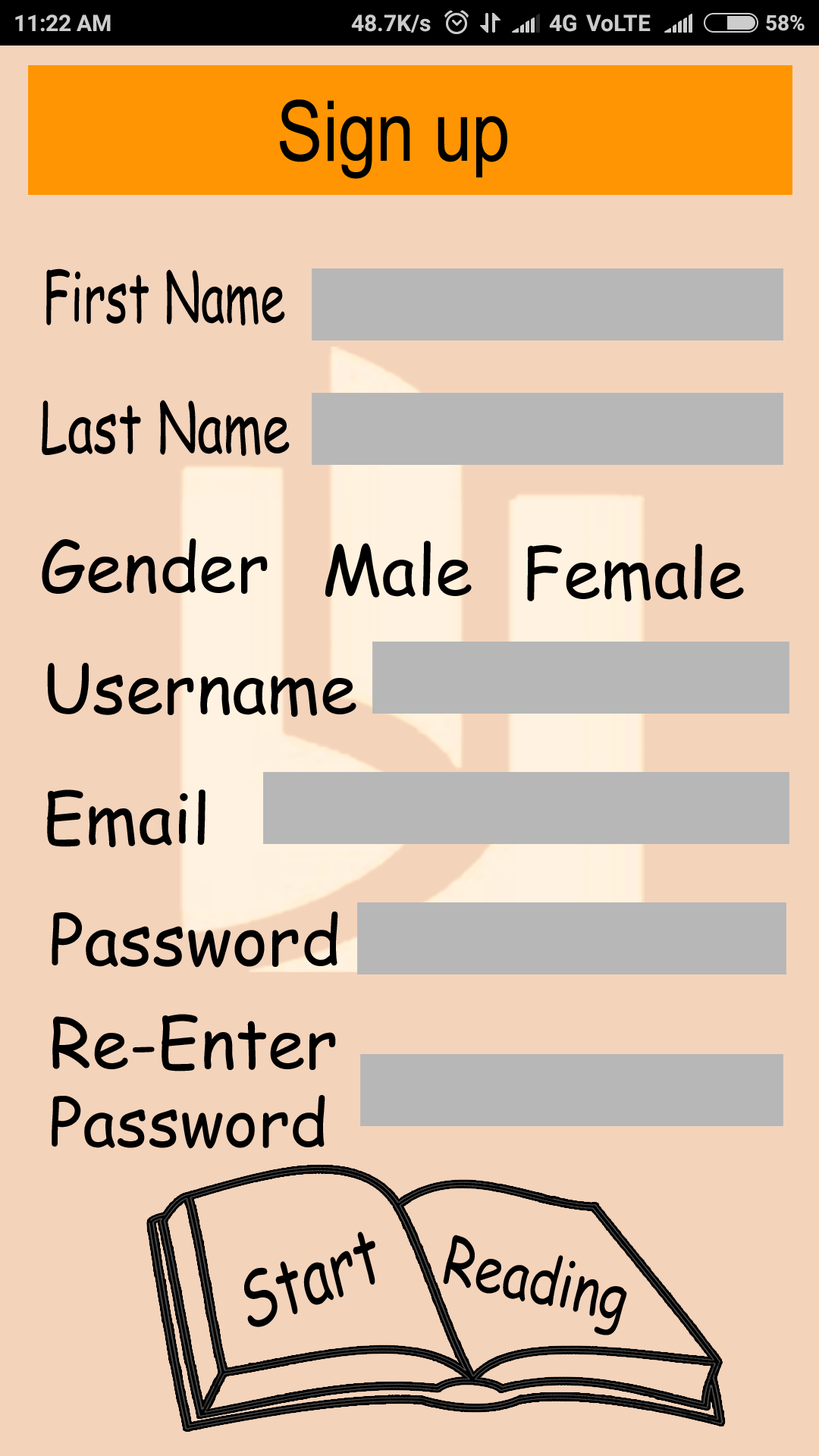
<style>
.page{position:relative;width:819px;height:1456px;background:#f4d3bb}
.page>*{position:absolute;margin:0}
.t1{font:84.1px "ArialMT";color:#000000;scale:0.82 1}
.t2{font:68.2px "ComicSansMS";color:#000000;scale:0.68 1}
.t3{font:68.2px "ComicSansMS";color:#000000;scale:0.74 1}
.t4{font:68.2px "ComicSansMS";color:#000000}
.t5{font:65.2px "ComicSansMS";color:#000000}
.t6{font:76.1px "ComicSansMS";color:#000000;scale:0.74 1}
.t7{font:65.2px "ComicSansMS";color:#000000;scale:0.8 1}
</style>
<div class="page">
<p class="t1" style="left:280px;top:99px;width:227px;height:80px">Sign up</p>
<p class="t2" style="left:46px;top:268px;width:239px;height:58px">First Name</p>
<p class="t3" style="left:42px;top:400px;width:248px;height:57px">Last Name</p>
<p class="t4" style="left:42px;top:538px;width:226px;height:56px">Gender</p>
<p class="t4" style="left:325px;top:541px;width:147px;height:57px">Male</p>
<p class="t4" style="left:527px;top:544px;width:217px;height:58px">Female</p>
<p class="t4" style="left:47px;top:663px;width:309px;height:54px">Username</p>
<p class="t4" style="left:47px;top:789px;width:159px;height:59px">Email</p>
<p class="t4" style="left:52px;top:912px;width:286px;height:56px">Password</p>
<p class="t4" style="left:52px;top:1014px;width:284px;height:135px">Re-Enter<br><span class="t5">Password</span></p>
<p class="t6" style="left:244px;top:1232px;width:131px;height:95px;rotate:-21deg">Start</p>
<p class="t7" style="left:443px;top:1235px;width:184px;height:100px;rotate:12deg">Reading</p>
</div>
